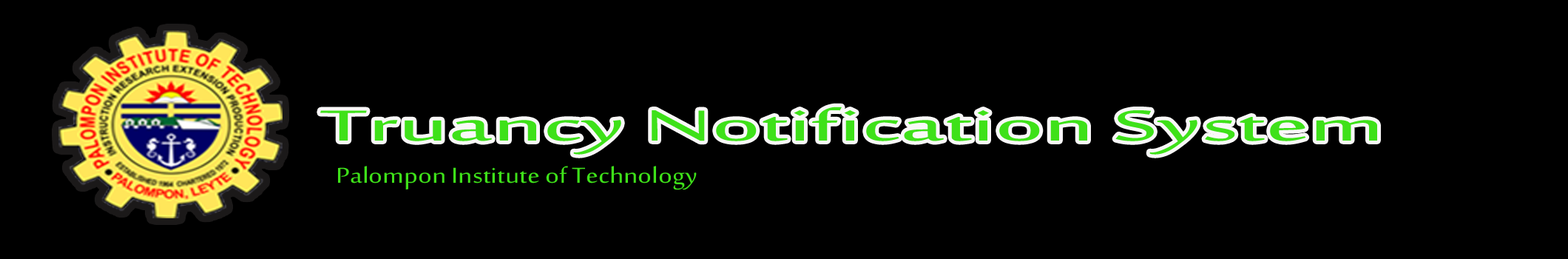
<style>
.page{position:relative;width:1568px;height:259px;background:#000000}
.page>*{position:absolute;margin:0}
.t1{font:60.1px "SakkalMajalla";color:#3ee119;scale:2.04 1}
.t2{font:29.7px "SakkalMajalla";color:#3ee119;scale:1.17 1}
</style>
<div class="page">
<p class="t1" style="left:320px;top:107px;width:1057px;height:48px">Truancy Notification System</p>
<p class="t2" style="left:338px;top:166px;width:359px;height:24px">Palompon Institute of Technology</p>
</div>
